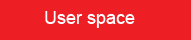
<style>
.page{position:relative;width:191px;height:40px;background:#ed1f24}
.page>*{position:absolute;margin:0}
.t1{font:18px "ArialMT";color:#ffffff}
</style>
<div class="page">
<p class="t1" style="left:45px;top:11px;width:90px;height:17px">User space</p>
</div>
